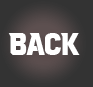
<style>
.page{position:relative;width:93px;height:87px;background:#333333}
.page>*{position:absolute;margin:0}
.t1{font:25px "VITRO-CORE-TTF";color:#ffffff}
</style>
<div class="page">
<p class="t1" style="left:8px;top:33px;width:72px;height:22px">BACK</p>
</div>
